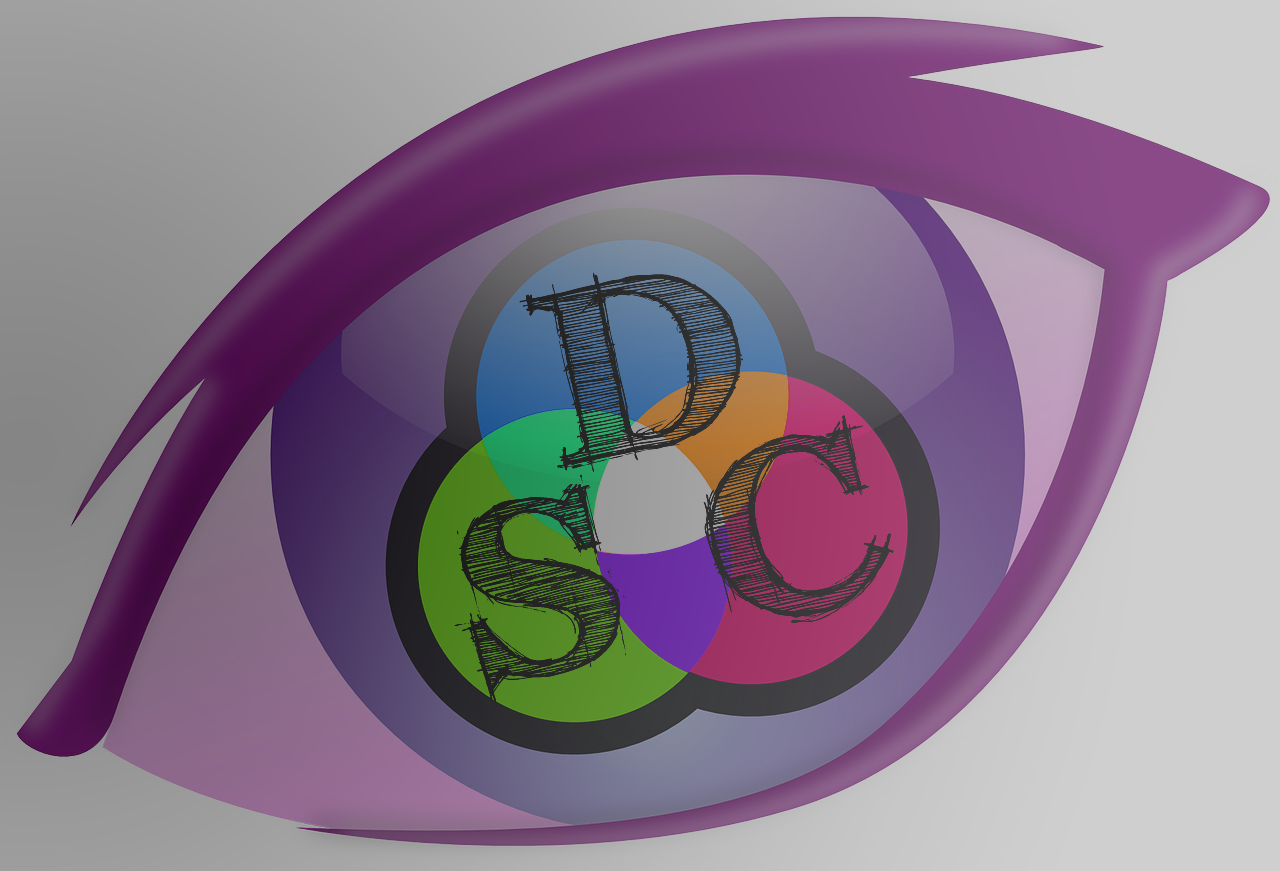
<style>
.page{position:relative;width:1280px;height:871px}
.page>*{position:absolute;margin:0}
.t1{font:250px "FFFTusj-Bold";color:#292929}
.t2{font:250px "FFFTusj-Bold";color:#363636}
.t3{font:250px "FFFTusj-Bold";color:#232323}
</style>
<div class="page">
<p class="t1" style="left:519px;top:272px;width:225px;height:201px;rotate:-11deg">D</p>
<p class="t2" style="left:703px;top:415px;width:191px;height:208px;rotate:-12deg">C</p>
<p class="t3" style="left:454px;top:474px;width:172px;height:228px;rotate:-14deg">S</p>
</div>
